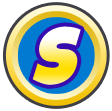
<style>
.page{position:relative;width:112px;height:111px;background:#ffffff}
.page>*{position:absolute;margin:0}
.t1{font:80px "LuckiestGuy-Regular";text-transform:uppercase;font-style:italic}
</style>
<div class="page">
<p class="t1" style="left:32px;top:26px;width:49px;height:59px;rotate:1deg">S</p>
</div>
